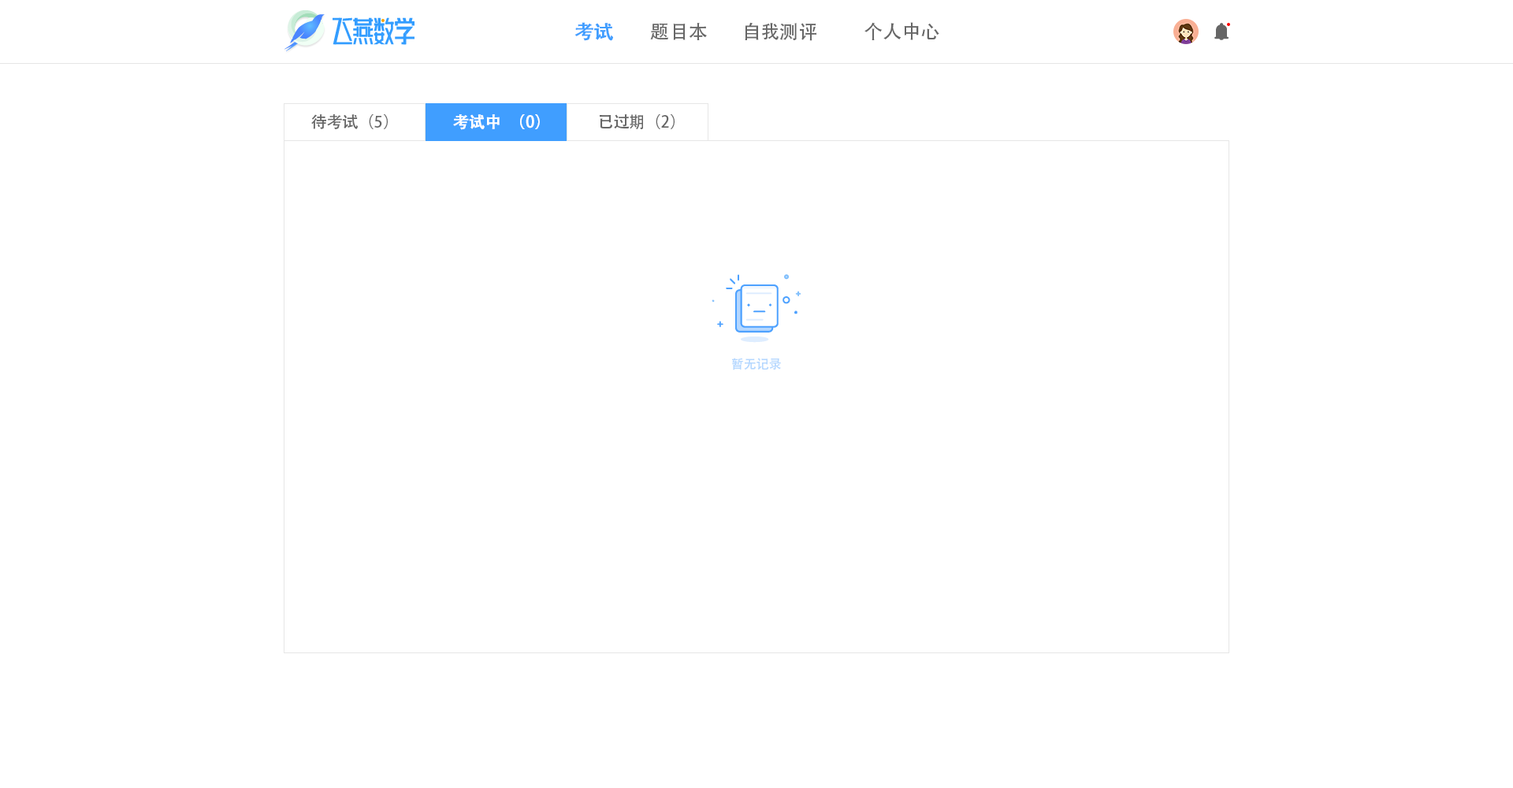
<style>
.page{position:relative;width:1513px;height:788px;background:#ffffff}
.page>*{position:absolute;margin:0}
.t1{font:18.9px "AdobeHeitiStd-Regular";color:#409eff;font-weight:bold}
.t2{font:18.9px "AdobeHeitiStd-Regular";color:#666666}
.t3{font:15.8px "AdobeHeitiStd-Regular";color:#666666}
.t4{font:15.8px "AdobeHeitiStd-Regular";color:#ffffff;font-weight:bold}
.t5{font:12.6px "AdobeHeitiStd-Regular";color:#b4d7ff}
</style>
<div class="page">
<p class="t1" style="left:575px;top:22px;width:38px;height:19px">考试</p>
<p class="t2" style="left:650px;top:23px;width:57px;height:17px">题目本</p>
<p class="t2" style="left:745px;top:22px;width:71px;height:19px">自我测评</p>
<p class="t2" style="left:865px;top:22px;width:74px;height:18px">个人中心</p>
<p class="t3" style="left:311px;top:114px;width:77px;height:15px">待考试（5）</p>
<p class="t4" style="left:453px;top:114px;width:87px;height:16px">考试中（0）</p>
<p class="t3" style="left:600px;top:114px;width:75px;height:15px">已过期（2）</p>
<p class="t5" style="left:732px;top:358px;width:49px;height:12px">暂无记录</p>
</div>
